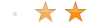
<style>
.page{position:relative;width:90px;height:24px;background:#ffffff}
.page>*{position:absolute;margin:0}
.t1{font:30px "SegoeUISymbol"}
</style>
<div class="page">
<p class="t1" style="left:34px;top:1px;width:23px;height:21px">★</p>
<p class="t1" style="left:64px;top:1px;width:23px;height:21px">★</p>
</div>
